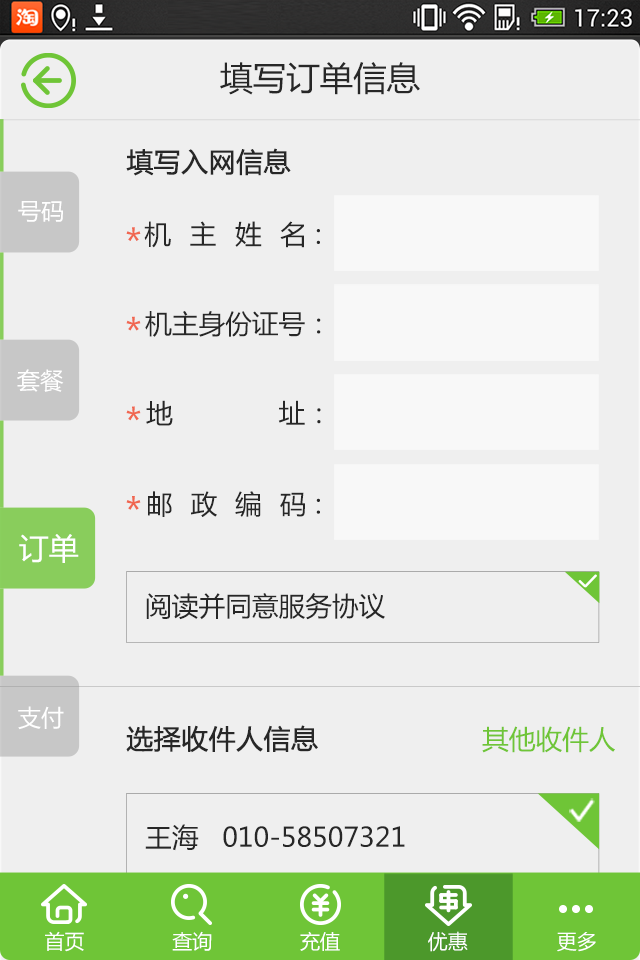
<style>
.page{position:relative;width:640px;height:960px;background:#efefef}
.page>*{position:absolute;margin:0}
.t1{font:33.3px "MicrosoftYaHei";color:#272727}
.t2{font:26.7px "MicrosoftYaHei";color:#272727;font-weight:bold}
.t3{font:23.3px "MicrosoftYaHei";color:#ffffff}
.t4{font:26.7px "MicrosoftYaHei";letter-spacing:0.7em;color:#272727}
.t5{font:37px "MicrosoftYaHei";color:#f06751}
.t6{font:26.7px "MicrosoftYaHei";color:#272727}
.t7{font:26.7px "MicrosoftYaHei";letter-spacing:0.67em;color:#272727}
.t8{font:30px "MicrosoftYaHei";color:#ffffff}
.t9{font:26.7px "MicrosoftYaHei";color:#6fc537}
.t10{font:20px "MicrosoftYaHei";color:#ffffff}
</style>
<div class="page">
<p class="t1" style="left:220px;top:62px;width:200px;height:33px">填写订单信息</p>
<p class="t2" style="left:126px;top:148px;width:165px;height:28px">填写入网信息</p>
<p class="t3" style="left:18px;top:201px;width:45px;height:21px">号码</p>
<p class="t4" style="left:144px;top:221px;width:176px;height:27px">机主姓名：</p>
<p class="t5" style="left:126px;top:227px;width:15px;height:14px">*</p>
<p class="t5" style="left:126px;top:316px;width:15px;height:15px">*</p>
<p class="t6" style="left:145px;top:311px;width:176px;height:26px">机主身份证号：</p>
<p class="t3" style="left:17px;top:369px;width:47px;height:23px">套餐</p>
<p class="t4" style="left:146px;top:400px;width:175px;height:26px">地址：</p>
<p class="t5" style="left:126px;top:406px;width:15px;height:15px">*</p>
<p class="t5" style="left:126px;top:496px;width:15px;height:14px">*</p>
<p class="t7" style="left:148px;top:491px;width:172px;height:26px">邮政编码：</p>
<p class="t8" style="left:19px;top:534px;width:60px;height:29px">订单</p>
<p class="t6" style="left:146px;top:593px;width:239px;height:27px">阅读并同意服务协议</p>
<p class="t3" style="left:18px;top:706px;width:46px;height:24px">支付</p>
<p class="t2" style="left:126px;top:725px;width:192px;height:28px">选择收件人信息</p>
<p class="t9" style="left:482px;top:726px;width:133px;height:27px">其他收件人</p>
<p class="t6" style="left:145px;top:824px;width:260px;height:27px">王海   010-58507321</p>
<p class="t10" style="left:45px;top:931px;width:39px;height:21px">首页</p>
<p class="t10" style="left:172px;top:931px;width:40px;height:20px">查询</p>
<p class="t10" style="left:300px;top:931px;width:40px;height:20px">充值</p>
<p class="t10" style="left:428px;top:931px;width:40px;height:21px">优惠</p>
<p class="t10" style="left:557px;top:932px;width:39px;height:20px">更多</p>
</div>
